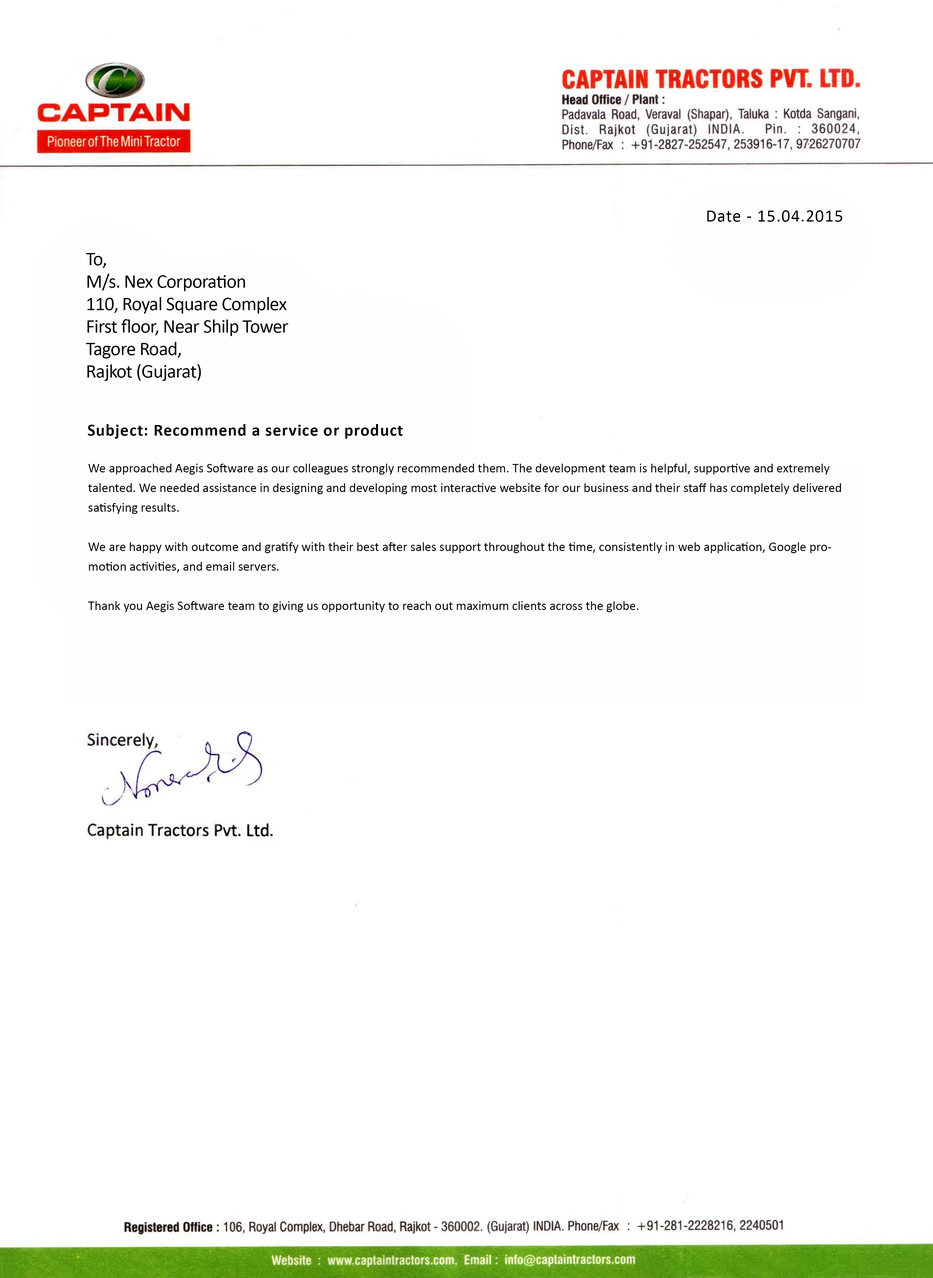
<style>
.page{position:relative;width:933px;height:1278px;background:#ffffff}
.page>*{position:absolute;margin:0}
.t1{font:17.5px "Calibri";letter-spacing:0.04em;color:#000000}
.t2{font:19.3px/22.5px "Calibri";letter-spacing:-0.025em;color:#000000}
.t3{font:16.8px "Calibri-Bold";letter-spacing:0.04em;color:#000000}
.t4{font:13.1px/19.7px "Calibri";color:#000000}
</style>
<div class="page">
<p class="t1" style="left:707px;top:210px;width:135px;height:12px">Date - 15.04.2015</p>
<p class="t2" style="left:86px;top:253px;width:202px;height:128px">To,<br>M/s. Nex Corporation<br>110, Royal Square Complex<br>First floor, Near Shilp Tower<br>Tagore Road,<br>Rajkot (Gujarat)</p>
<p class="t3" style="left:88px;top:424px;width:315px;height:15px">Subject: Recommend a service or product</p>
<p class="t4" style="left:88px;top:464px;width:753px;height:148px">We approached Aegis Software as our colleagues strongly recommended them. The development team is helpful, supportive and extremely talented. We needed assistance in designing and developing most interactive website for our business and their staff has completely delivered satisfying results.<br><br>We are happy with outcome and gratify with their best after sales support throughout the time, consistently in web application, Google promotion activities, and email servers.<br><br>Thank you Aegis Software team to giving us opportunity to reach out maximum clients across the globe.</p>
</div>
